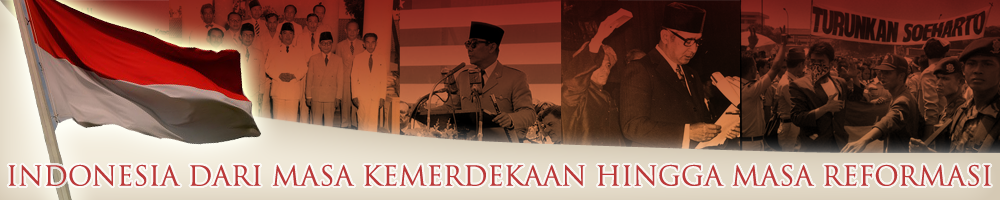
<style>
.page{position:relative;width:1000px;height:200px}
.page>*{position:absolute;margin:0}
.t1{font:26.8px "TrajanPro-Regular";color:#bb3939}
</style>
<div class="page">
<p class="t1" style="left:8px;top:164px;width:983px;height:22px">INDONESIA DARI MASA KEMERDEKAAN HINGGA MASA REFORMASI</p>
</div>
